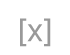
<style>
.page{position:relative;width:70px;height:55px;background:#ffffff}
.page>*{position:absolute;margin:0}
.t1{font:31.8px "DroidSans";color:#999999}
</style>
<div class="page">
<p class="t1" style="left:20px;top:18px;width:31px;height:29px">[x]</p>
</div>
